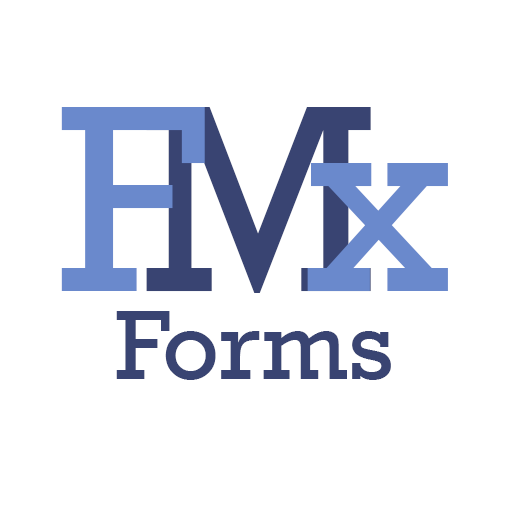
<style>
.page{position:relative;width:512px;height:512px;background:#ffffff}
.page>*{position:absolute;margin:0}
.t1{font:271.4px "Rockwell";color:#6a89cc}
.t2{font:271.4px "Rockwell";color:#394472}
.t3{font:100px "Rockwell";color:#394472}
</style>
<div class="page">
<p class="t1" style="left:61px;top:107px;width:144px;height:184px">F</p>
<p class="t2" style="left:146px;top:107px;width:225px;height:186px">M</p>
<p class="t1" style="left:307px;top:163px;width:141px;height:128px">x</p>
<p class="t3" style="left:116px;top:311px;width:275px;height:69px">Forms</p>
</div>
